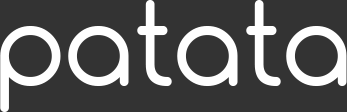
<style>
.page{position:relative;width:347px;height:112px;background:#333333}
.page>*{position:absolute;margin:0}
.t1{font:110px "Comfortaa";color:#ffffff}
</style>
<div class="page">
<p class="t1" style="left:0px;top:0px;width:347px;height:112px">patata</p>
</div>
